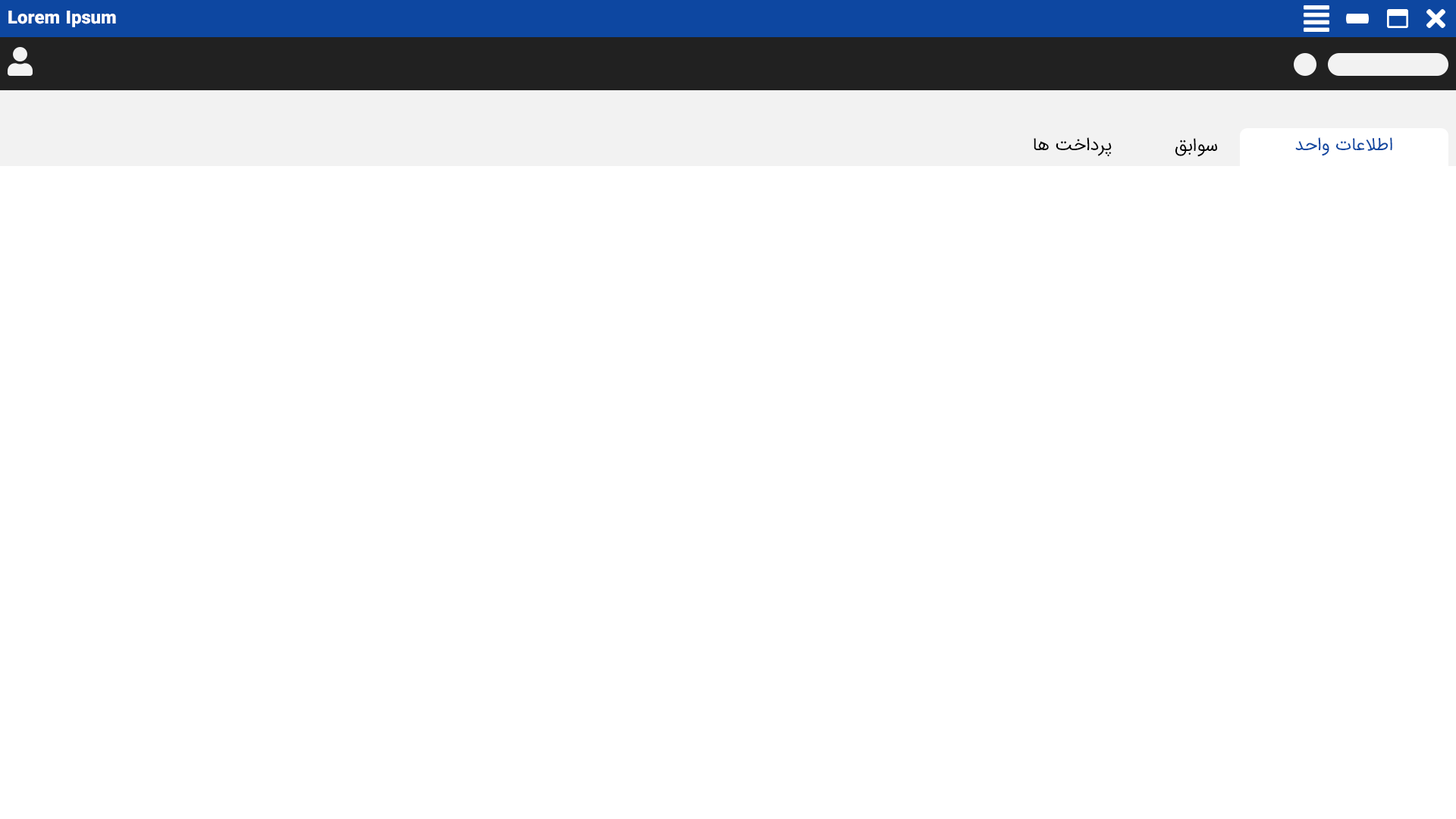
<style>
.page{position:relative;width:1456px;height:819px;background:#ffffff}
.page>*{position:absolute;margin:0}
.t1{font:18.2px "IRANSans-Black";color:#ffffff}
.t2{font:18.2px "IRANSans";color:#000000}
.t3{font:18.2px "IRANSans";color:#0d47a1}
</style>
<div class="page">
<p class="t1" style="left:8px;top:11px;width:108px;height:16px">Lorem Ipsum</p>
<p class="t2" style="left:1034px;top:137px;width:78px;height:20px">پرداخت ها</p>
<p class="t3" style="left:1295px;top:137px;width:97px;height:19px">اطلاعات واحد</p>
<p class="t2" style="left:1175px;top:138px;width:43px;height:19px">سوابق</p>
</div>
